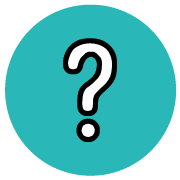
<style>
.page{position:relative;width:180px;height:180px;background:#2ab7b8}
.page>*{position:absolute;margin:0}
.t1{font:105px "STHupo"}
</style>
<div class="page">
<p class="t1" style="left:65px;top:40px;width:50px;height:100px">？</p>
</div>
